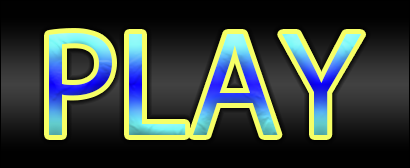
<style>
.page{position:relative;width:410px;height:168px;background:#010101}
.page>*{position:absolute;margin:0}
.t1{font:150px "MyriadPro-Regular"}
</style>
<div class="page">
<p class="t1" style="left:49px;top:33px;width:313px;height:102px">PLAY</p>
</div>
